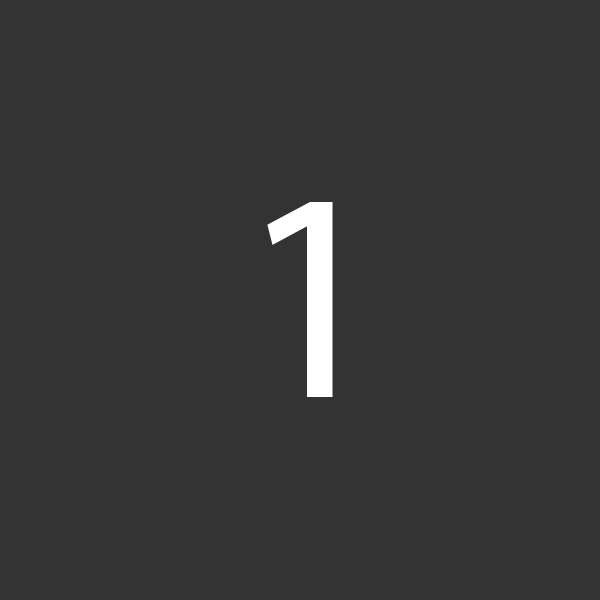
<style>
.page{position:relative;width:600px;height:600px;background:#333333}
.page>*{position:absolute;margin:0}
.t1{font:300px "MyriadPro-Regular";color:#ffffff}
</style>
<div class="page">
<p class="t1" style="left:267px;top:202px;width:66px;height:195px">1</p>
</div>
